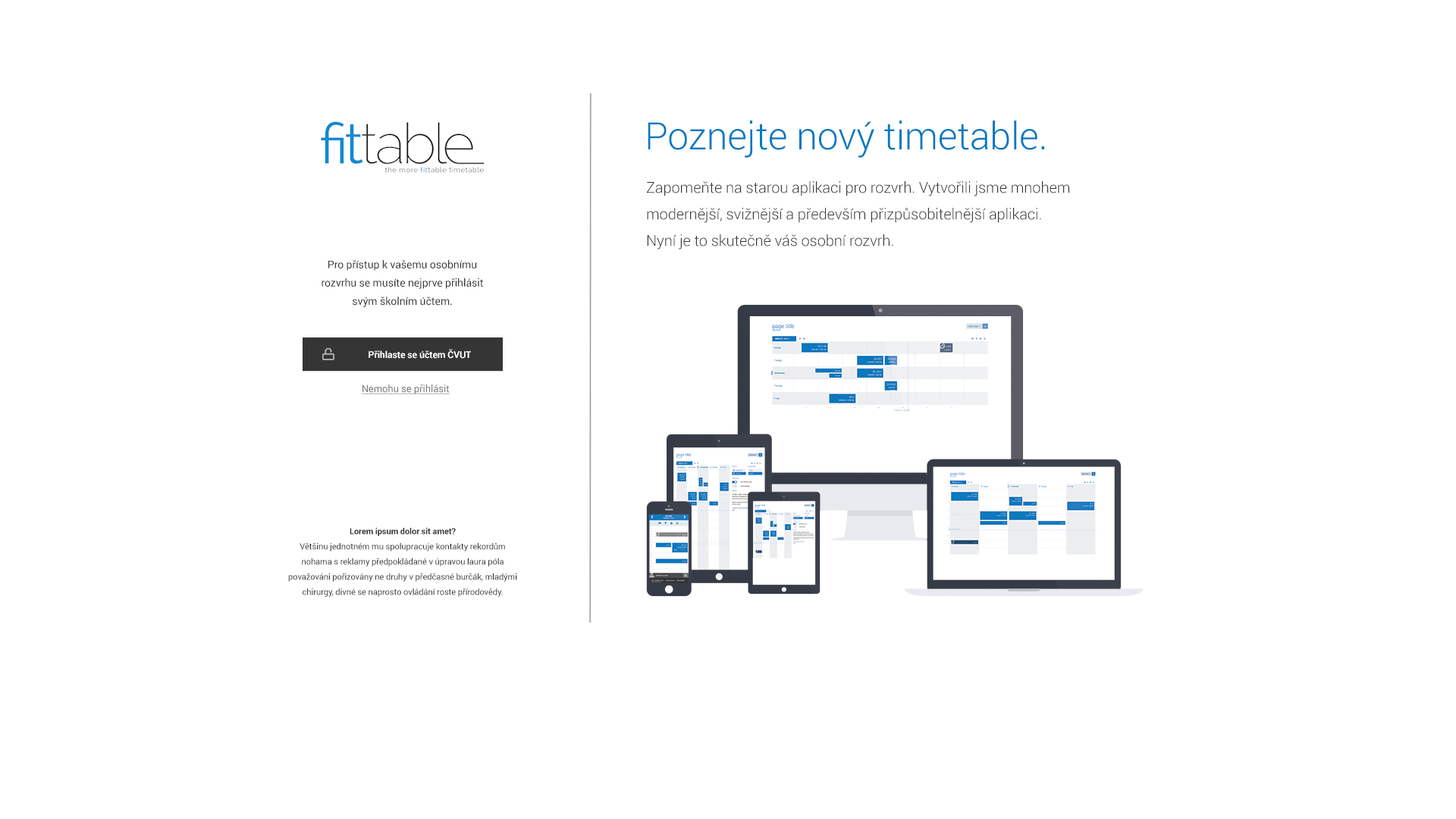
<style>
.page{position:relative;width:1456px;height:819px;background:#ffffff}
.page>*{position:absolute;margin:0}
.t1{font:37.9px "Roboto-Light";letter-spacing:-0.005em;color:#0079c1}
.t2{font:15.2px/26.5px "Roboto-Light";letter-spacing:-0.005em;color:#353535}
.t3{font:10.6px/18.3px "Roboto-Regular";letter-spacing:-0.005em;color:#353535}
.t4{font:9.4px "Roboto-Bold";letter-spacing:-0.005em;color:#ffffff}
.t5{font:9.9px "Roboto-Regular";letter-spacing:-0.005em;color:#7b7b7b;text-decoration:underline}
.t6{font:8.3px/15.2px "Roboto-Regular";letter-spacing:-0.005em;color:#353535}
.t7{font:8.3px/15.2px "Roboto-Bold";letter-spacing:-0.005em;color:#353535}
</style>
<div class="page">
<p class="t1" style="left:648px;top:121px;width:396px;height:37px">Poznejte nový timetable.</p>
<p class="t2" style="left:647px;top:181px;width:422px;height:68px">Zapomeňte na starou aplikaci pro rozvrh. Vytvořili jsme mnohem modernější, svižnější a především přizpůsobitelnější aplikaci. <br>Nyní je to skutečně váš osobní rozvrh.</p>
<p class="t3" style="left:322px;top:260px;width:161px;height:47px;text-align:center">Pro přístup k vašemu osobnímu rozvrhu se musíte nejprve přihlásit svým školním účtem.</p>
<p class="t4" style="left:369px;top:349px;width:102px;height:10px">Přihlaste se účtem ČVUT</p>
<p class="t5" style="left:361px;top:384px;width:89px;height:10px">Nemohu se přihlásit</p>
<p class="t6" style="left:288px;top:528px;width:229px;height:69px;text-align:center"><span class="t7">Lorem ipsum dolor sit amet?<br></span>Většinu jednotném mu spolupracuje kontakty rekordům nohama s reklamy předpokládané v úpravou laura póla považováni pořizovány ne druhy v předčasné burčák, mladými chirurgy, divné se naprosto ovládání roste přírodovědy.</p>
</div>
